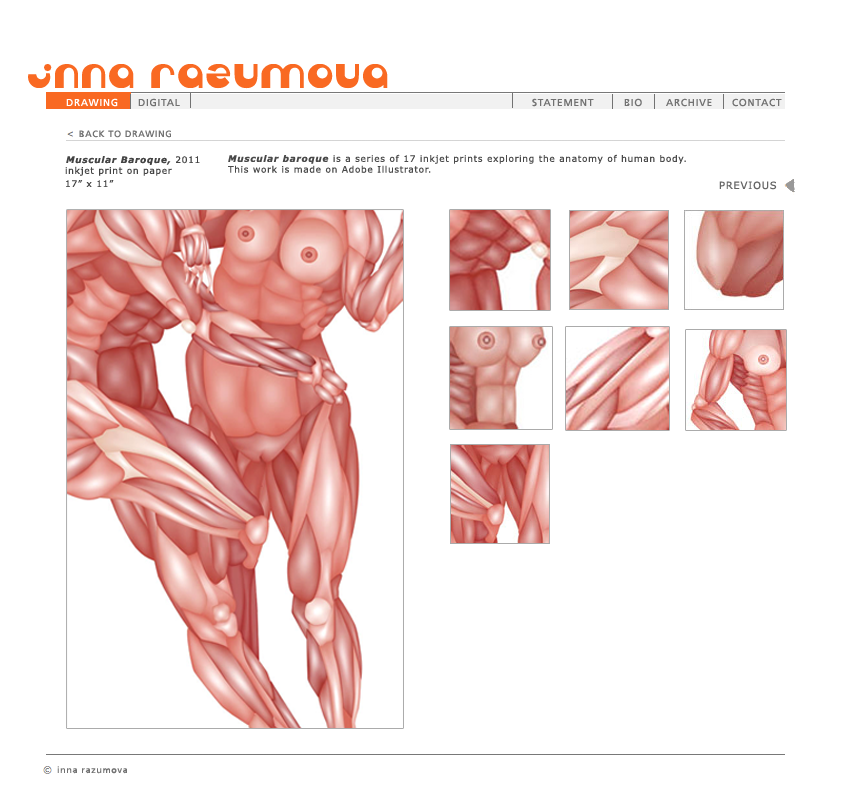
<style>
.page{position:relative;width:860px;height:800px;background:#ffffff}
.page>*{position:absolute;margin:0}
.t1{font:24px "Tabun";letter-spacing:0.075em;color:#f96922}
.t2{font:10px "Frutiger-Roman";letter-spacing:0.075em;color:#ffffff}
.t3{font:10px "Frutiger-Roman";letter-spacing:0.075em;color:#727272}
.t4{font:9px "Frutiger-Roman";letter-spacing:0.075em;color:#727272}
.t5{font:9px "Verdana-BoldItalic";letter-spacing:0.075em;color:#444444}
.t6{font:9px "Verdana";letter-spacing:0.075em;color:#444444}
.t7{font:9px "Verdana";letter-spacing:0.075em;color:#494949}
.t8{font:9px "Verdana-BoldItalic";letter-spacing:0.075em;color:#494949}
.t9{font:10px "Verdana";letter-spacing:0.075em;color:#666666}
</style>
<div class="page">
<p class="t1" style="left:28px;top:64px;width:360px;height:25px">inna razumova</p>
<p class="t2" style="left:66px;top:98px;width:52px;height:9px">DRAWING</p>
<p class="t3" style="left:138px;top:98px;width:42px;height:9px">DIGITAL</p>
<p class="t3" style="left:532px;top:98px;width:62px;height:9px">STATEMENT</p>
<p class="t3" style="left:624px;top:98px;width:18px;height:9px">BIO</p>
<p class="t3" style="left:666px;top:98px;width:46px;height:9px">ARCHIVE</p>
<p class="t3" style="left:732px;top:98px;width:50px;height:9px">CONTACT</p>
<p class="t4" style="left:79px;top:130px;width:92px;height:8px">BACK TO DRAWING</p>
<p class="t5" style="left:66px;top:156px;width:134px;height:9px">Muscular Baroque, <span class="t6">2011</span></p>
<p class="t7" style="left:228px;top:154px;width:458px;height:19px"><span class="t8">Muscular baroque</span> is a series of 17 inkjet prints exploring the anatomy of human body. <br>This work is made on Adobe Illustrator.</p>
<p class="t6" style="left:65px;top:166px;width:107px;height:10px">inkjet print on paper</p>
<p class="t6" style="left:66px;top:180px;width:48px;height:7px">17” x 11”</p>
<p class="t9" style="left:719px;top:181px;width:58px;height:9px">PREVIOUS</p>
<p class="t4" style="left:57px;top:766px;width:70px;height:8px">inna razumova</p>
</div>
